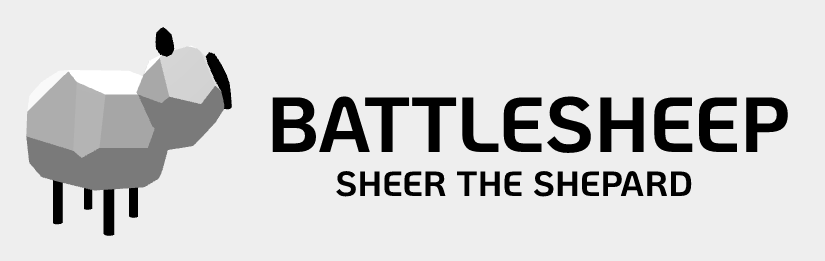
<style>
.page{position:relative;width:825px;height:261px;background:#eeeeee}
.page>*{position:absolute;margin:0}
.t1{font:78px "KoHo-Bold";color:#000000}
.t2{font:35px "KoHo-Bold";color:#000000}
</style>
<div class="page">
<p class="t1" style="left:272px;top:96px;width:516px;height:57px">BATTLESHEEP</p>
<p class="t2" style="left:336px;top:171px;width:356px;height:26px">SHEER THE SHEPARD</p>
</div>
